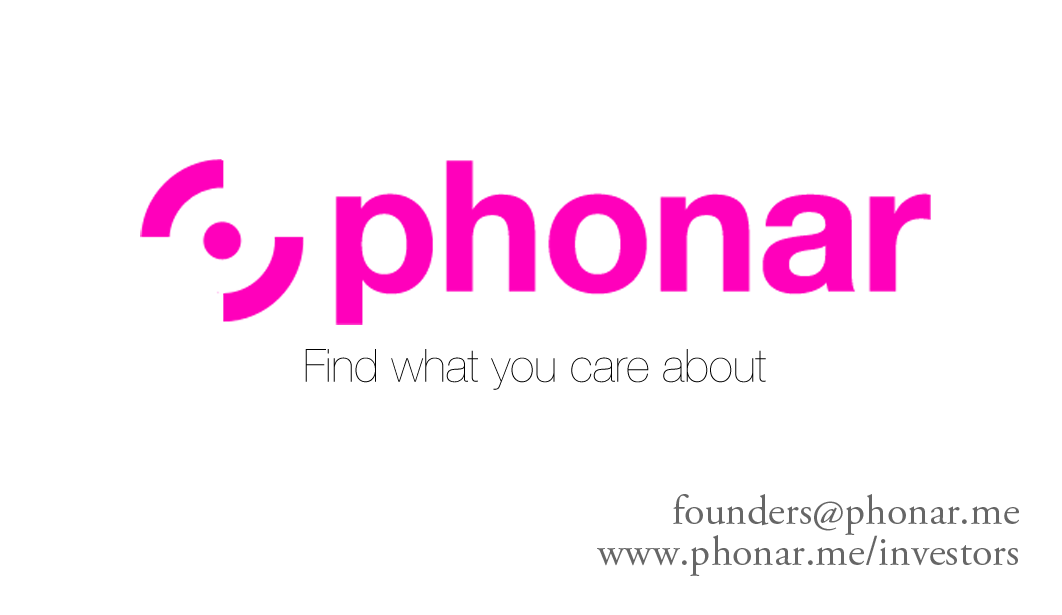
<style>
.page{position:relative;width:1062px;height:615px;background:#ffffff}
.page>*{position:absolute;margin:0}
.t1{font:45.8px "HelveticaNeue-UltraLight";color:#000000}
.t2{font:41.7px "AGaramondPro-Regular";color:#666666}
</style>
<div class="page">
<p class="t1" style="left:305px;top:349px;width:461px;height:41px">Find what you care about</p>
<p class="t2" style="left:673px;top:494px;width:346px;height:41px">founders@phonar.me</p>
<p class="t2" style="left:597px;top:535px;width:421px;height:41px">www.phonar.me/investors</p>
</div>
